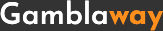
<style>
.page{position:relative;width:163px;height:31px;background:#333333}
.page>*{position:absolute;margin:0}
.t1{font:30px "JosefinSans-SemiBold";color:#ffffff}
.t2{font:30px "JosefinSans-Bold";color:#fe8f1c}
</style>
<div class="page">
<p class="t1" style="left:0px;top:0px;width:163px;height:31px">Gambla<span class="t2">way</span></p>
</div>
